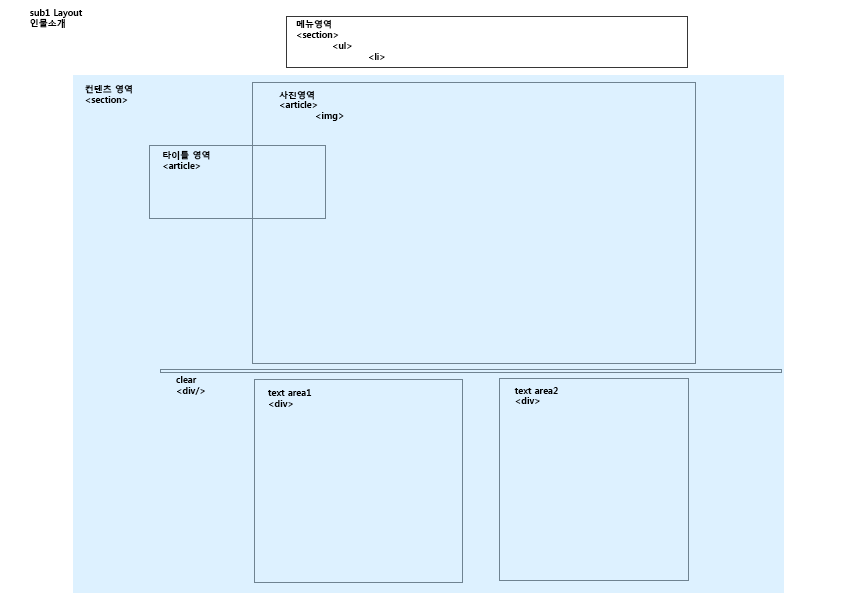
<style>
.page{position:relative;width:842px;height:595px;background:#ddf1ff}
.page>*{position:absolute;margin:0}
.t1{font:9px "MalgunGothicBold";color:#000000}
</style>
<div class="page">
<p class="t1" style="left:30px;top:9px;width:53px;height:19px">sub1 Layout<br>인물소개</p>
<p class="t1" style="left:296px;top:19px;width:89px;height:41px">메뉴영역<br>&lt;section&gt;<br> &lt;ul&gt;<br>  &lt;li&gt;</p>
<p class="t1" style="left:85px;top:84px;width:47px;height:19px">컨텐츠 영역<br>&lt;section&gt;</p>
<p class="t1" style="left:279px;top:90px;width:65px;height:31px">사진영역<br>&lt;article&gt;<br> &lt;img&gt;</p>
<p class="t1" style="left:163px;top:150px;width:47px;height:19px">타이틀 영역<br>&lt;article&gt;</p>
<p class="t1" style="left:176px;top:376px;width:29px;height:19px">clear<br>&lt;div/&gt;</p>
<p class="t1" style="left:268px;top:389px;width:44px;height:18px">text area1<br>&lt;div&gt;</p>
<p class="t1" style="left:514px;top:387px;width:44px;height:17px">text area2<br>&lt;div&gt;</p>
</div>
